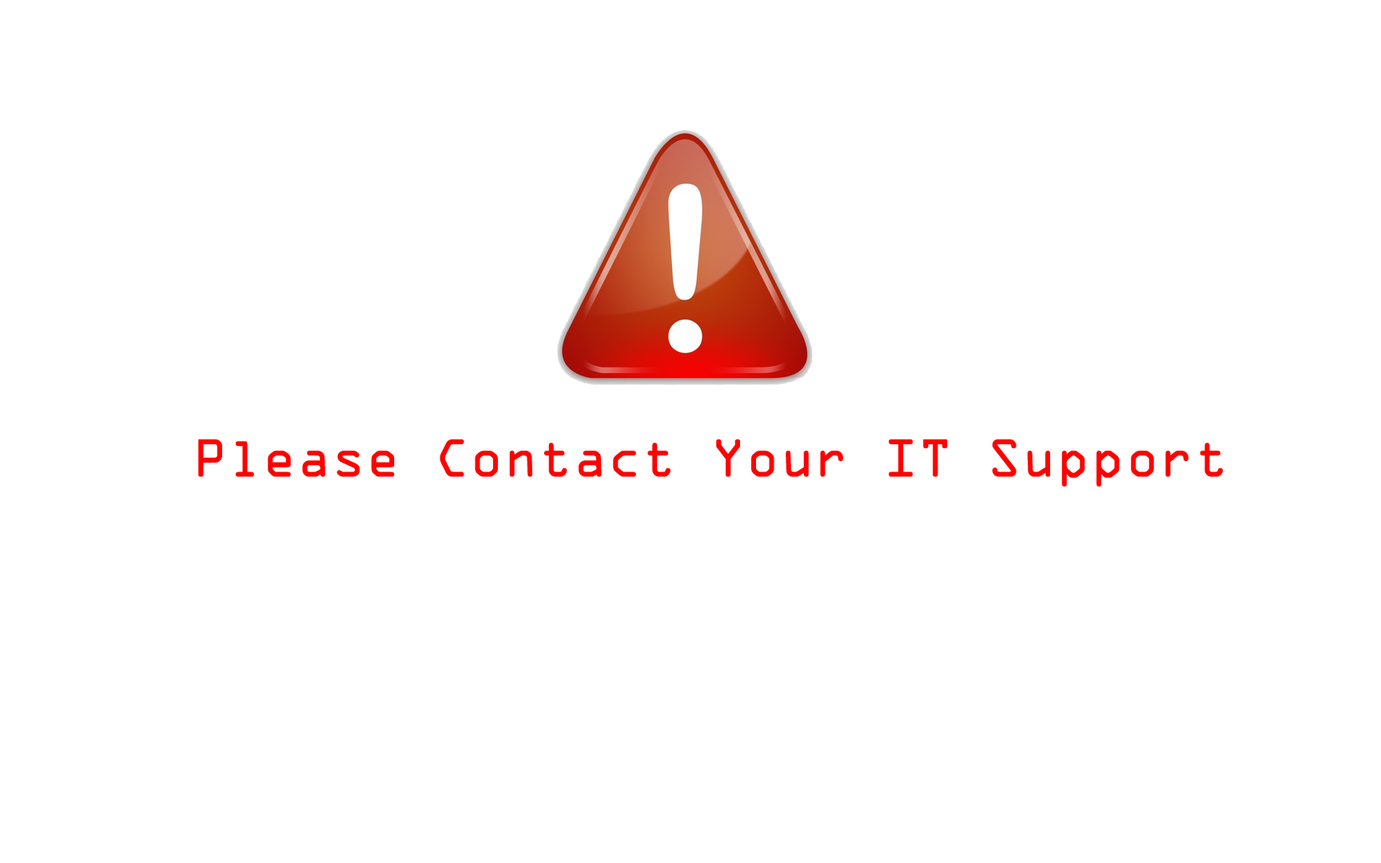
<style>
.page{position:relative;width:1381px;height:863px;background:#ffffff}
.page>*{position:absolute;margin:0}
.t1{font:48px "OCRAStd";color:#ff0000}
</style>
<div class="page">
<p class="t1" style="left:198px;top:439px;width:1025px;height:48px">Please Contact Your IT Support</p>
</div>
